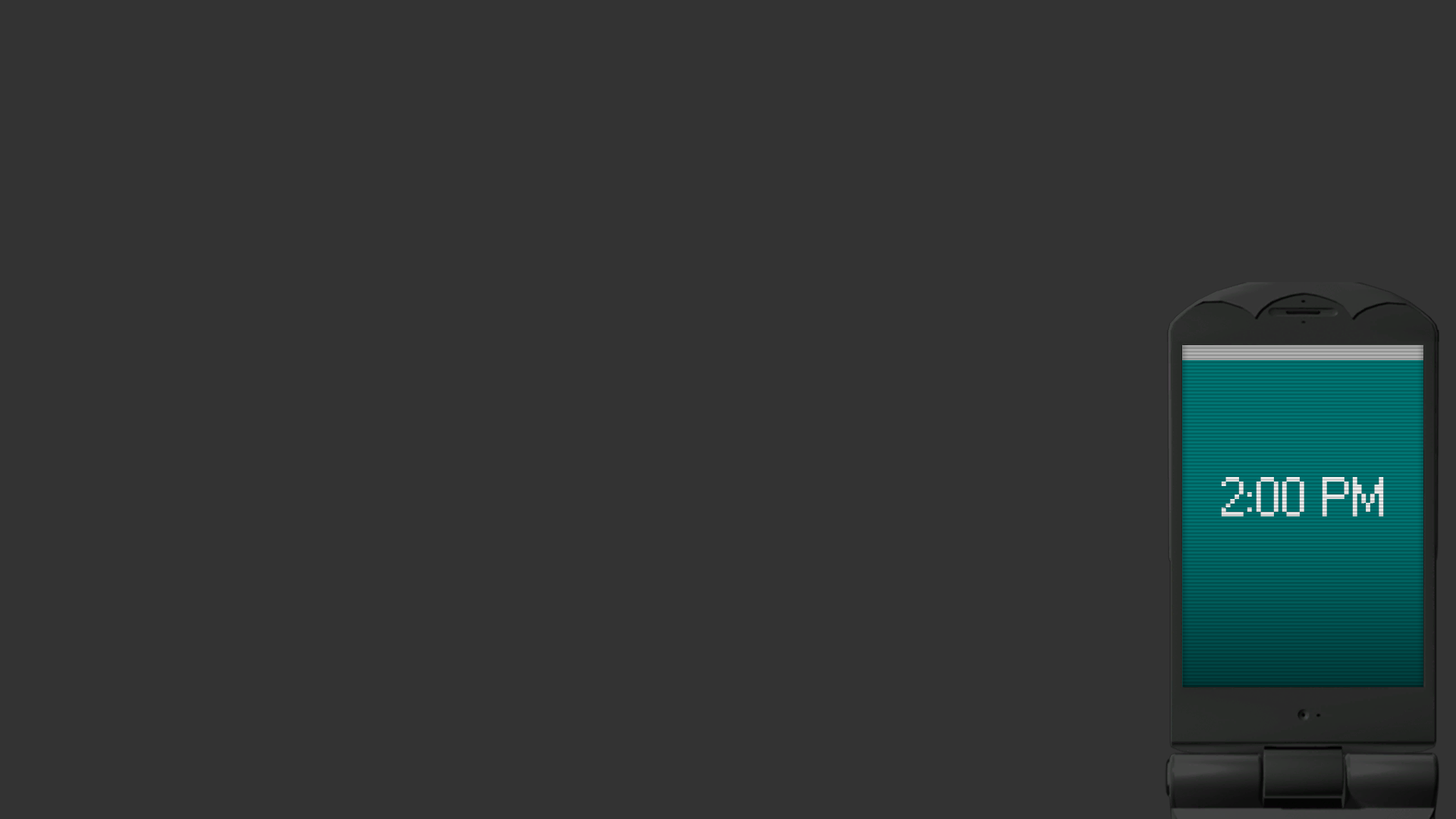
<style>
.page{position:relative;width:1456px;height:819px;background:#333333}
.page>*{position:absolute;margin:0}
.t1{font:54.8px "Windows"}
</style>
<div class="page">
<p class="t1" style="left:1221px;top:477px;width:163px;height:39px">2:00 PM</p>
</div>
